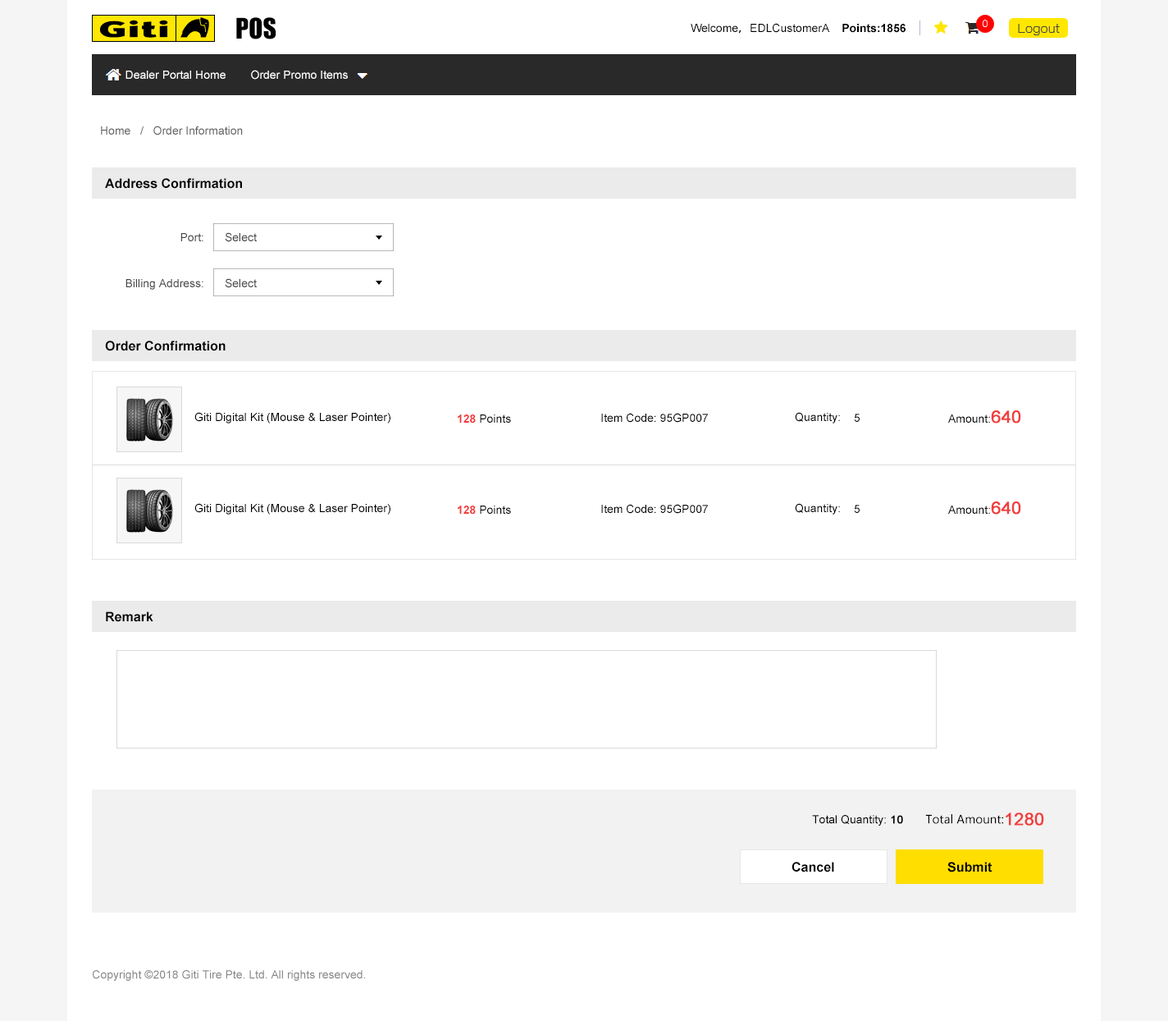
<style>
.page{position:relative;width:1168px;height:1021px;background:#ffffff}
.page>*{position:absolute;margin:0}
.t1{font:26.3px "Impact";color:#000000}
.t2{font:11.5px "ArialMT";color:#000000}
.t3{font:11.5px "AdobeHeitiStd-Regular";color:#000000}
.t4{font:11.5px "Arial-BoldMT";color:#000000}
.t5{font:11.5px "ArialMT";color:#ffffff}
.t6{font:11.5px "ArialMT";color:#626262}
.t7{font:13.1px "Arial-BoldMT";color:#000000}
.t8{font:11.5px/45.9px "ArialMT";color:#464646}
.t9{font:17.2px "ArialMT";color:#f23c3c;font-weight:bold}
.t10{font:11.5px "Arial-BoldMT";color:#f23c3c}
.t11{font:11.5px "ArialMT";color:#000000;font-weight:bold}
.t12{font:11.5px "MicrosoftYaHei";color:#000000}
.t13{font:13.1px "Arial-BoldMT";color:#010101}
.t14{font:11.5px "ArialMT";color:#898989}
</style>
<div class="page">
<p class="t1" style="left:236px;top:17px;width:40px;height:22px">POS</p>
<p class="t2" style="left:691px;top:23px;width:215px;height:11px">Welcome<span class="t3">，</span>EDLCustomerA    <span class="t4">Points:1856</span></p>
<p class="t5" style="left:126px;top:71px;width:100px;height:8px">Dealer Portal Home</p>
<p class="t5" style="left:251px;top:70px;width:97px;height:10px">Order Promo Items</p>
<p class="t6" style="left:101px;top:126px;width:142px;height:9px">Home   /   Order Information</p>
<p class="t7" style="left:105px;top:178px;width:137px;height:11px">Address Confirmation</p>
<p class="t8" style="left:126px;top:233px;width:77px;height:57px;text-align:right">Port:<br>Billing Address:</p>
<p class="t8" style="left:225px;top:232px;width:32px;height:56px">Select<br>Select</p>
<p class="t7" style="left:105px;top:340px;width:121px;height:11px">Order Confirmation</p>
<p class="t2" style="left:194px;top:412px;width:197px;height:11px">Giti Digital Kit (Mouse &amp; Laser Pointer)</p>
<p class="t2" style="left:601px;top:413px;width:107px;height:10px">Item Code: 95GP007</p>
<p class="t2" style="left:795px;top:412px;width:45px;height:11px">Quantity:</p>
<p class="t2" style="left:854px;top:414px;width:6px;height:8px">5</p>
<p class="t2" style="left:948px;top:410px;width:73px;height:13px">Amount:<span class="t9">640</span></p>
<p class="t2" style="left:458px;top:414px;width:53px;height:9px"><span class="t10">128</span> Points</p>
<p class="t2" style="left:194px;top:503px;width:197px;height:11px">Giti Digital Kit (Mouse &amp; Laser Pointer)</p>
<p class="t2" style="left:458px;top:505px;width:53px;height:9px"><span class="t10">128</span> Points</p>
<p class="t2" style="left:601px;top:504px;width:107px;height:10px">Item Code: 95GP007</p>
<p class="t2" style="left:795px;top:503px;width:45px;height:11px">Quantity:</p>
<p class="t2" style="left:854px;top:505px;width:6px;height:8px">5</p>
<p class="t2" style="left:948px;top:501px;width:73px;height:13px">Amount:<span class="t9">640</span></p>
<p class="t7" style="left:106px;top:611px;width:47px;height:11px">Remark</p>
<p class="t2" style="left:812px;top:812px;width:232px;height:13px">Total Quantity: <span class="t11">10       </span><span class="t12">Total Amount:</span><span class="t9">1280</span></p>
<p class="t13" style="left:792px;top:861px;width:42px;height:11px">Cancel</p>
<p class="t13" style="left:948px;top:861px;width:45px;height:11px">Submit</p>
<p class="t14" style="left:93px;top:970px;width:272px;height:10px">Copyright ©2018 Giti Tire Pte. Ltd. All rights reserved.</p>
</div>
